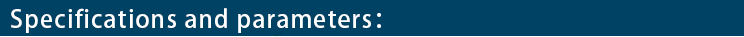
<style>
.page{position:relative;width:744px;height:37px;background:#004263}
.page>*{position:absolute;margin:0}
.t1{font:24px "AdobeHeitiStd-Regular";letter-spacing:0.05em;color:#ffffff}
</style>
<div class="page">
<p class="t1" style="left:11px;top:8px;width:370px;height:25px">Specifications and parameters：</p>
</div>
